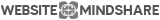
<style>
.page{position:relative;width:160px;height:20px;background:#ffffff}
.page>*{position:absolute;margin:0}
.t1{font:14px "Patagonia-Medium";letter-spacing:-0.025em;color:#555555}
.t2{font:14px "Patagonia-Medium";color:#555555}
</style>
<div class="page">
<p class="t1" style="left:1px;top:5px;width:57px;height:10px">WEBSITE</p>
<p class="t2" style="left:80px;top:5px;width:80px;height:10px">MINDSHARE</p>
</div>
